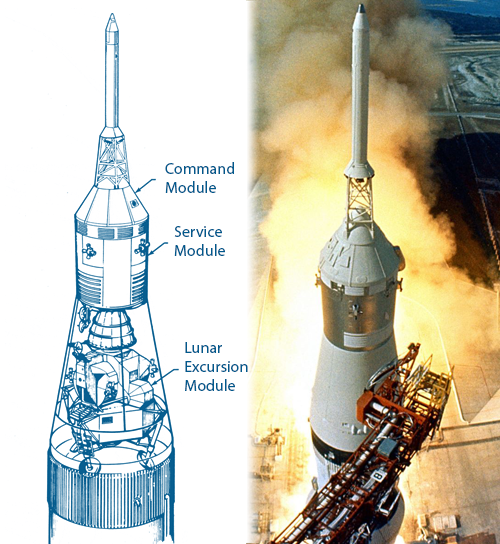
<style>
.page{position:relative;width:500px;height:544px;background:#ffffff}
.page>*{position:absolute;margin:0}
.t1{font:16px "MyriadPro-Regular";color:#00598c}
</style>
<div class="page">
<p class="t1" style="left:165px;top:162px;width:69px;height:31px">Command<br>Module</p>
<p class="t1" style="left:174px;top:226px;width:51px;height:30px">Service<br>Module</p>
<p class="t1" style="left:185px;top:342px;width:63px;height:49px">Lunar<br>Excursion<br>Module</p>
</div>
